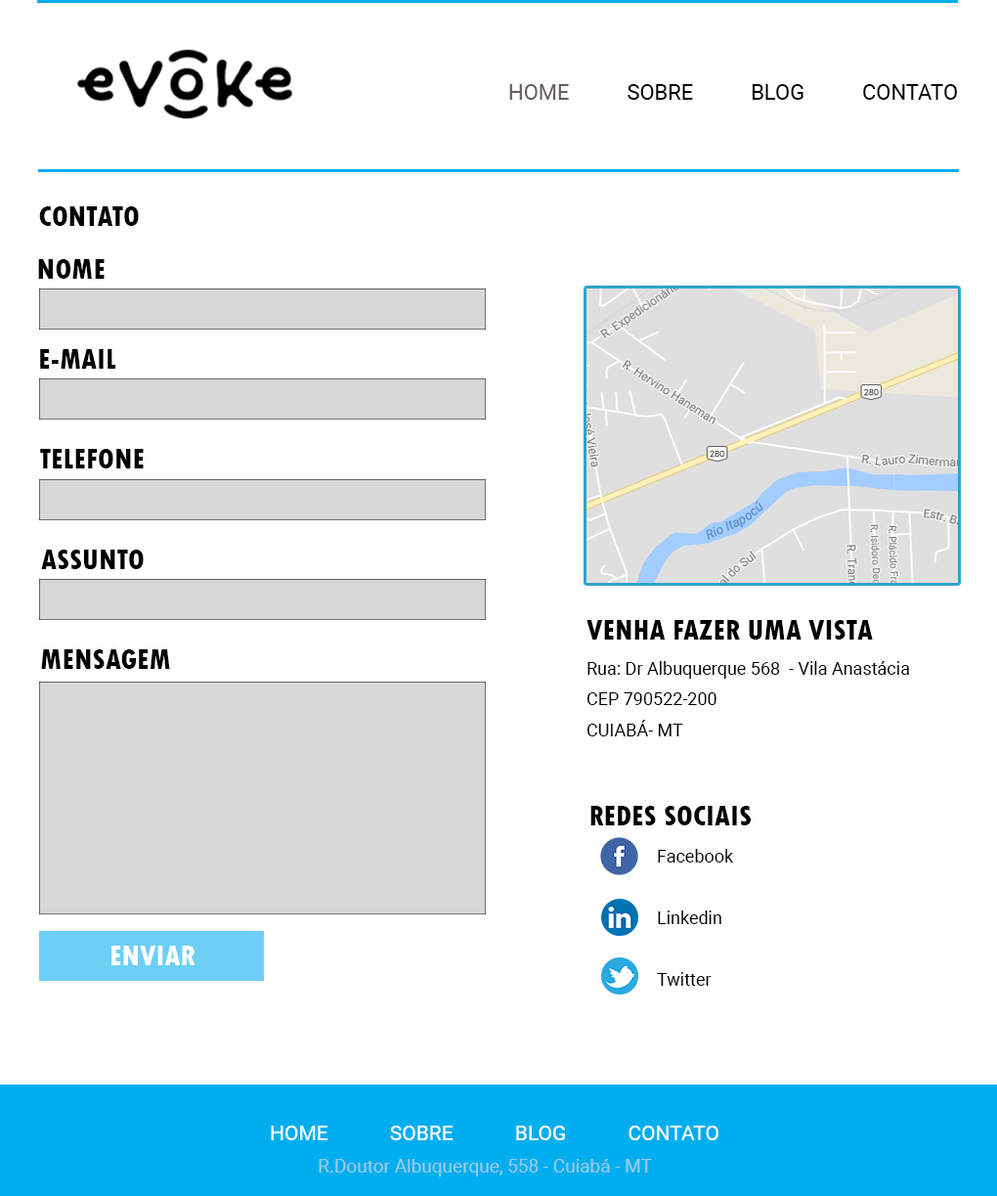
<style>
.page{position:relative;width:997px;height:1196px;background:#ffffff}
.page>*{position:absolute;margin:0}
.t1{font:21.5px "Roboto-Regular";color:#000000}
.t2{font:21.5px "Roboto-Regular";color:#665f5f}
.t3{font:29.3px "TwCenMT-CondensedExtraBold";color:#000000}
.t4{font:17.6px "Roboto-Regular";color:#000000}
.t5{font:29.3px "TwCenMT-CondensedExtraBold";color:#ffffff}
.t6{font:20.5px "Roboto-Regular";color:#ffffff}
.t7{font:18.6px "Roboto-Regular";color:#9bcbe6}
</style>
<div class="page">
<p class="t1" style="left:509px;top:84px;width:448px;height:16px"><span class="t2">HOME</span> SOBRE BLOG CONTATO</p>
<p class="t3" style="left:39px;top:206px;width:100px;height:20px">CONTATO</p>
<p class="t3" style="left:38px;top:259px;width:67px;height:20px">NOME</p>
<p class="t3" style="left:40px;top:349px;width:76px;height:20px">E-MAIL</p>
<p class="t3" style="left:40px;top:449px;width:104px;height:19px">TELEFONE</p>
<p class="t3" style="left:41px;top:549px;width:103px;height:20px">ASSUNTO</p>
<p class="t3" style="left:587px;top:620px;width:286px;height:19px">VENHA FAZER UMA VISTA</p>
<p class="t3" style="left:41px;top:649px;width:129px;height:20px">MENSAGEM</p>
<p class="t4" style="left:587px;top:661px;width:323px;height:75px">Rua: Dr Albuquerque 568  - Vila Anastácia<br>CEP 790522-200<br>CUIABÁ- MT</p>
<p class="t3" style="left:591px;top:806px;width:160px;height:19px">REDES SOCIAIS</p>
<p class="t4" style="left:657px;top:849px;width:77px;height:137px">Facebook<br>  <br>  Linkedin<br>  <br>  Twitter</p>
<p class="t5" style="left:111px;top:945px;width:85px;height:20px">ENVIAR</p>
<p class="t6" style="left:271px;top:1125px;width:448px;height:15px">HOME SOBRE BLOG CONTATO</p>
<p class="t7" style="left:319px;top:1159px;width:333px;height:17px">R.Doutor Albuquerque, 558 - Cuiabá - MT</p>
</div>
